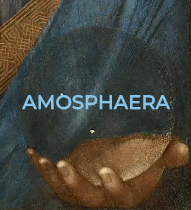
<style>
.page{position:relative;width:191px;height:210px}
.page>*{position:absolute;margin:0}
.t1{font:19.6px "Montserrat_531.000wght_0ital";color:#87c4e9}
</style>
<div class="page">
<p class="t1" style="left:22px;top:95px;width:148px;height:15px">AMOSPHAERA</p>
</div>
